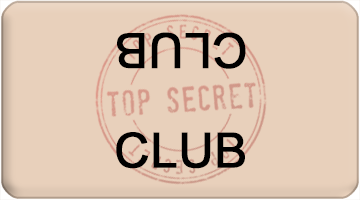
<style>
.page{position:relative;width:360px;height:200px;background:#e8d0bb}
.page>*{position:absolute;margin:0}
.t1{font:48px "ArialMT";color:#000000;font-weight:bold}
</style>
<div class="page">
<p class="t1" style="left:117px;top:32px;width:129px;height:37px;rotate:180deg">CLUB</p>
<p class="t1" style="left:116px;top:132px;width:129px;height:37px">CLUB</p>
</div>
